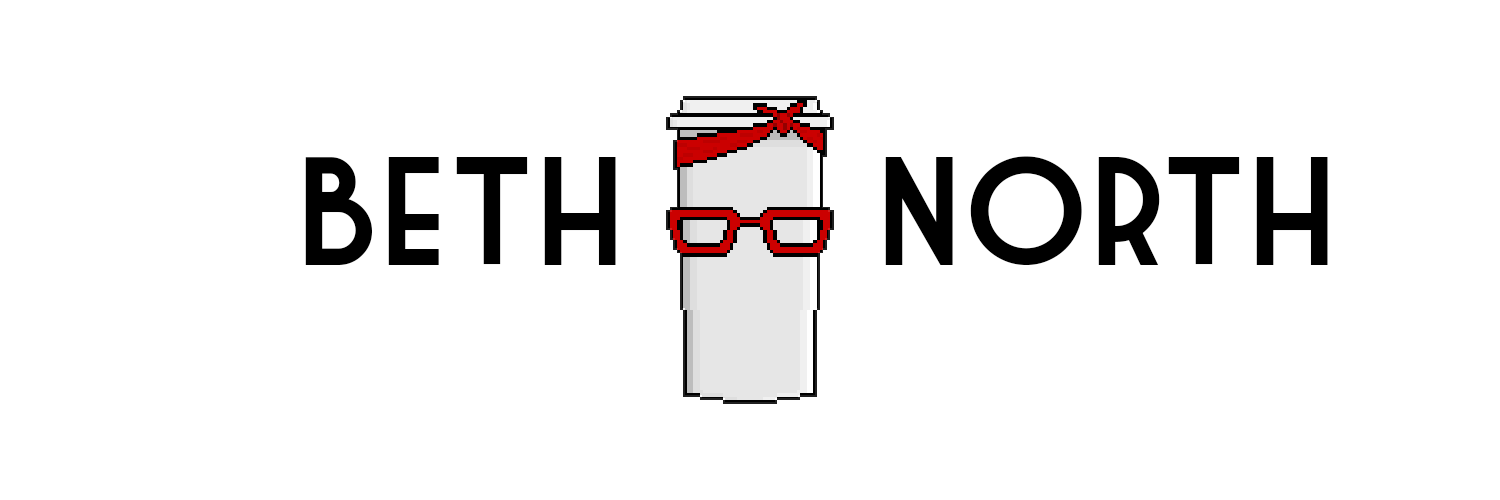
<style>
.page{position:relative;width:1500px;height:500px;background:#ffffff}
.page>*{position:absolute;margin:0}
.t1{font:150px "MarketDeco";color:#000000}
</style>
<div class="page">
<p class="t1" style="left:305px;top:157px;width:311px;height:108px">Beth</p>
<p class="t1" style="left:885px;top:156px;width:443px;height:109px">North</p>
</div>
